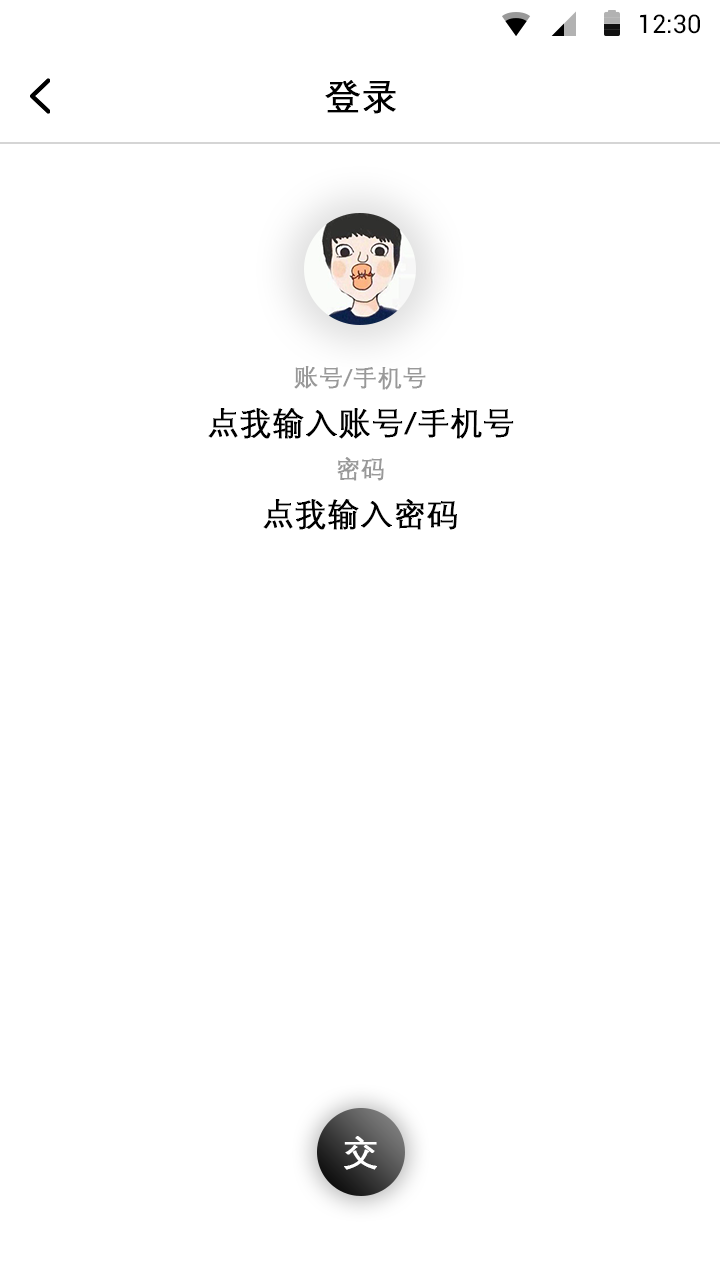
<style>
.page{position:relative;width:720px;height:1280px;background:#ffffff}
.page>*{position:absolute;margin:0}
.t1{font:25.4px "Roboto-Regular";color:#000000}
.t2{font:36px "DengXian-Regular";color:#000000;font-weight:bold}
.t3{font:24px "DengXian-Regular";color:#999999;font-weight:bold}
.t4{font:32px "DengXian-Regular";color:#000000;font-weight:bold}
.t5{font:36px "DengXian-Regular";color:#ffffff;font-weight:bold}
</style>
<div class="page">
<p class="t1" style="left:640px;top:14px;width:60px;height:20px">12:30</p>
<p class="t2" style="left:325px;top:80px;width:71px;height:34px">登录</p>
<p class="t3" style="left:294px;top:366px;width:132px;height:24px">账号/手机号</p>
<p class="t4" style="left:208px;top:408px;width:306px;height:31px">点我输入账号/手机号</p>
<p class="t3" style="left:337px;top:457px;width:47px;height:24px">密码</p>
<p class="t4" style="left:263px;top:499px;width:194px;height:31px">点我输入密码</p>
<p class="t5" style="left:344px;top:1136px;width:33px;height:34px">交</p>
</div>
